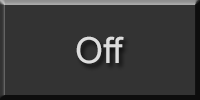
<style>
.page{position:relative;width:200px;height:100px;background:#333333}
.page>*{position:absolute;margin:0}
.t1{font:36px "ArialMT";color:#dddddd}
</style>
<div class="page">
<p class="t1" style="left:76px;top:36px;width:48px;height:28px">Off</p>
</div>
